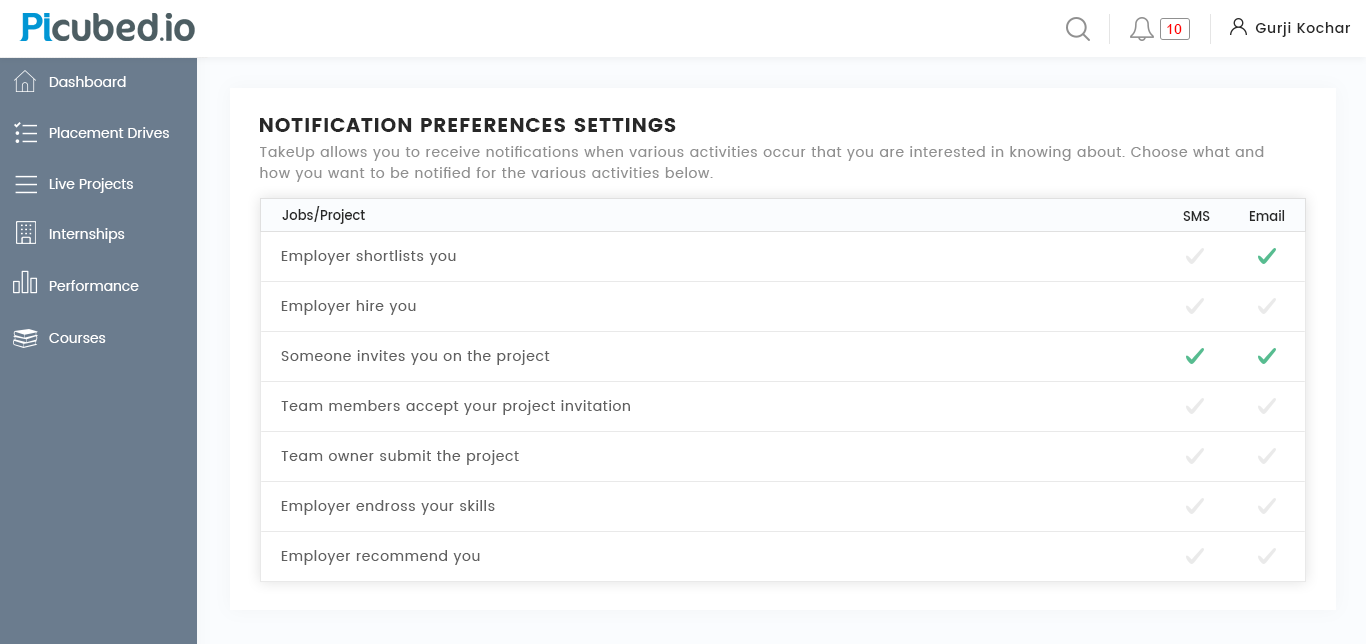
<style>
.page{position:relative;width:1366px;height:644px;background:#ffffff}
.page>*{position:absolute;margin:0}
.t1{font:14px "Ubuntu";color:#ff0000}
.t2{font:14px "Poppins-Regular";color:#ffffff}
.t3{font:20px "Poppins";letter-spacing:0.03em;color:#282828;text-transform:uppercase}
.t4{font:14px/21px "Poppins-Regular";letter-spacing:0.05em;color:#909090}
.t5{font:13px "Poppins-Medium";color:#282828}
.t6{font:14px/50px "Poppins-Regular";letter-spacing:0.05em;color:#606060}
</style>
<div class="page">
<p class="t1" style="left:1167px;top:24px;width:15px;height:10px">10</p>
<p class="t2" style="left:49px;top:76px;width:77px;height:11px">Dashboard</p>
<p class="t3" style="left:260px;top:118px;width:416px;height:14px">Notification Preferences settings</p>
<p class="t2" style="left:49px;top:127px;width:120px;height:11px">Placement Drives</p>
<p class="t4" style="left:260px;top:146px;width:1004px;height:36px">TakeUp allows you to receive notifications when various activities occur that you are interested in knowing about. Choose what and <br>how you want to be notified for the various activities below.</p>
<p class="t2" style="left:49px;top:178px;width:84px;height:15px">Live Projects</p>
<p class="t5" style="left:282px;top:206px;width:83px;height:18px">Jobs/Project</p>
<p class="t5" style="left:1183px;top:211px;width:27px;height:10px">SMS</p>
<p class="t5" style="left:1249px;top:210px;width:36px;height:11px">Email</p>
<p class="t2" style="left:49px;top:228px;width:76px;height:15px">Internships</p>
<p class="t6" style="left:281px;top:250px;width:349px;height:315px">Employer shortlists you<br>Employer hire you<br>Someone invites you on the project <br>Team members accept your project invitation<br>Team owner submit the project<br>Employer endross your skills<br>Employer recommend you</p>
<p class="t2" style="left:49px;top:280px;width:90px;height:11px">Performance</p>
<p class="t2" style="left:49px;top:333px;width:57px;height:10px">Courses</p>
</div>
